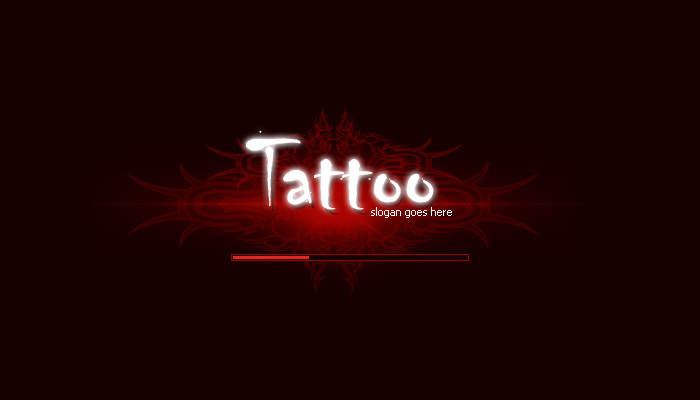
<style>
.page{position:relative;width:700px;height:400px;background:#170000}
.page>*{position:absolute;margin:0}
.t1{font:103.5px "Chiller-Regular";color:#ffffff}
.t2{font:11px "Tahoma";color:#ffffff}
</style>
<div class="page">
<p class="t1" style="left:245px;top:130px;width:189px;height:80px">Tattoo</p>
<p class="t2" style="left:371px;top:207px;width:81px;height:11px">slogan goes here</p>
</div>
